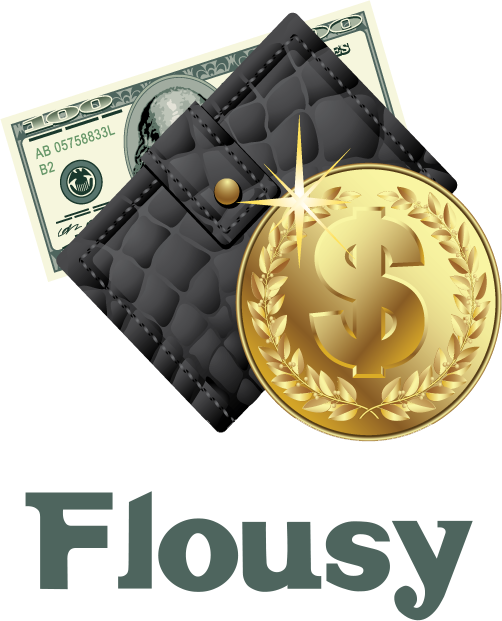
<style>
.page{position:relative;width:502px;height:621px;background:#ffffff}
.page>*{position:absolute;margin:0}
.t1{font:144px "Vintage";color:#4e655e}
</style>
<div class="page">
<p class="t1" style="left:25px;top:491px;width:448px;height:130px">Flousy</p>
</div>
